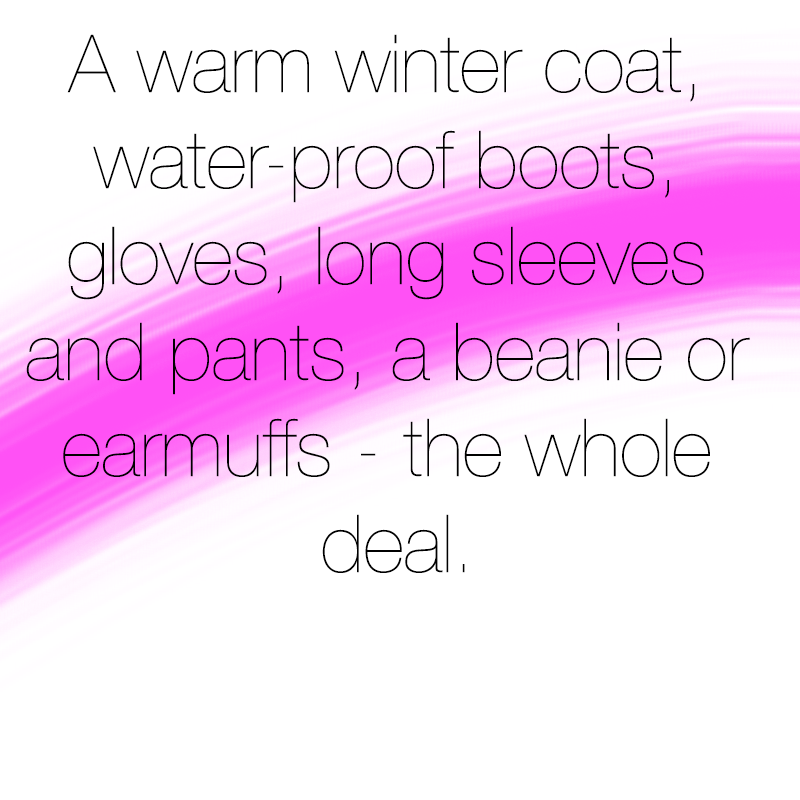
<style>
.page{position:relative;width:800px;height:800px;background:#ffffff}
.page>*{position:absolute;margin:0}
.t1{font:80px "HelveticaNeue-UltraLight";color:#000000}
</style>
<div class="page">
<p class="t1" style="left:26px;top:34px;width:724px;height:539px;text-align:center">A warm winter coat, <br>water-proof boots, <br>gloves, long sleeves <br>and pants, a beanie or <br>earmuffs - the whole <br>deal.</p>
</div>
